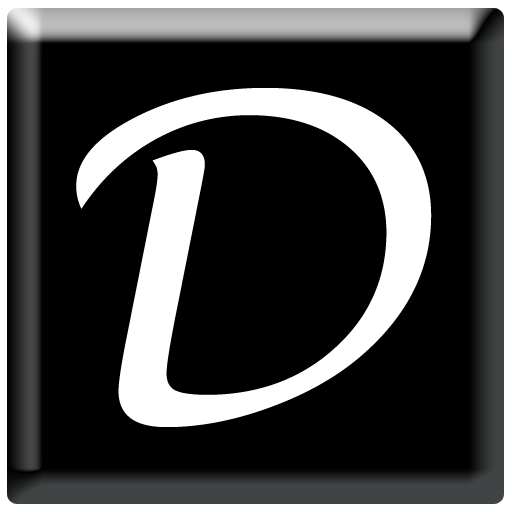
<style>
.page{position:relative;width:512px;height:512px;background:#000000}
.page>*{position:absolute;margin:0}
.t1{font:431px "LucidaHandwriting-Italic";color:#ffffff}
</style>
<div class="page">
<p class="t1" style="left:76px;top:88px;width:356px;height:339px">D</p>
</div>
